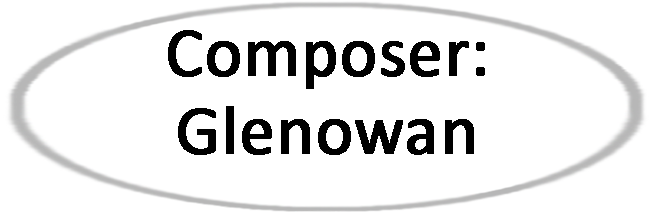
<style>
.page{position:relative;width:650px;height:213px;background:#ffffff}
.page>*{position:absolute;margin:0}
.t1{font:70px "Calibri";color:#000000;font-weight:bold}
</style>
<div class="page">
<p class="t1" style="left:168px;top:30px;width:317px;height:59px">Composer:</p>
<p class="t1" style="left:178px;top:106px;width:296px;height:49px">Glenowan</p>
</div>
